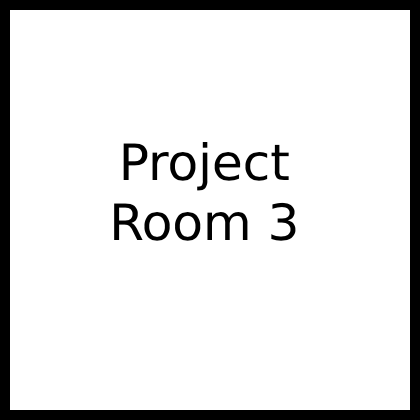
<style>
.page{position:relative;width:420px;height:420px;background:#ffffff}
.page>*{position:absolute;margin:0}
.t1{font:50px "DejaVuSans";color:#000000}
</style>
<div class="page">
<p class="t1" style="left:114px;top:142px;width:182px;height:99px;text-align:center">Project<br>Room 3</p>
</div>
